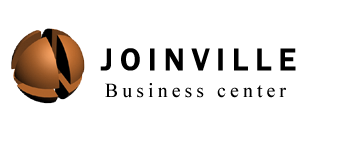
<style>
.page{position:relative;width:350px;height:151px;background:#ffffff}
.page>*{position:absolute;margin:0}
.t1{font:32px "FranklinGothic-Medium";letter-spacing:0.2em;color:#000000;text-transform:uppercase;font-weight:bold}
.t2{font:20px "TimesNewRomanPSMT";letter-spacing:0.2em;color:#000000}
</style>
<div class="page">
<p class="t1" style="left:100px;top:48px;width:196px;height:23px">Joinville</p>
<p class="t2" style="left:105px;top:83px;width:181px;height:15px">Business center</p>
</div>
